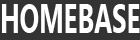
<style>
.page{position:relative;width:140px;height:40px;background:#333333}
.page>*{position:absolute;margin:0}
.t1{font:39.8px "SegoeUI-Bold";color:#ffffff;scale:0.65 1}
</style>
<div class="page">
<p class="t1" style="left:2px;top:4px;width:138px;height:29px">HOMEBASE</p>
</div>
